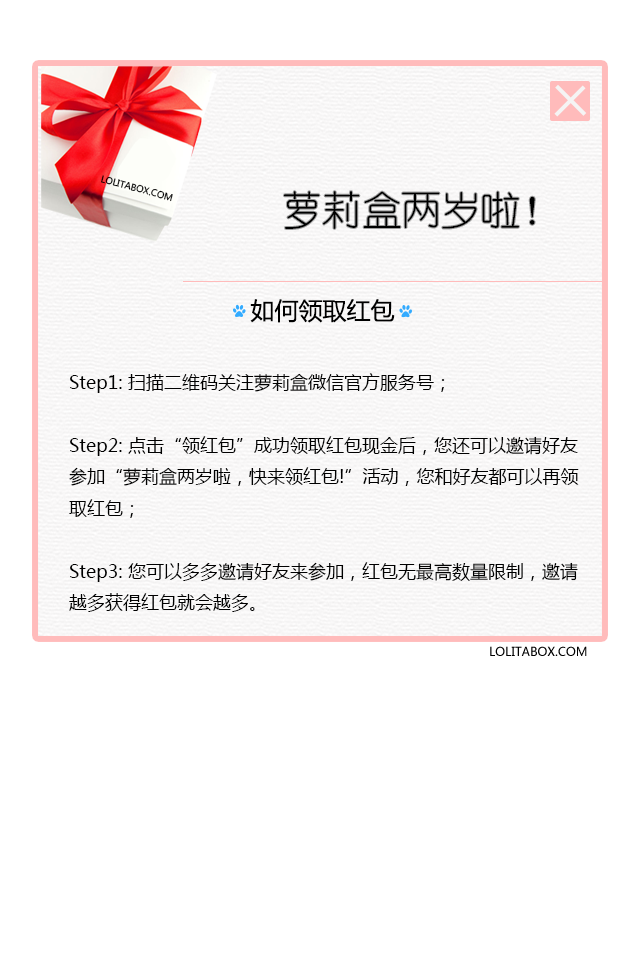
<style>
.page{position:relative;width:640px;height:960px;background:#ffffff}
.page>*{position:absolute;margin:0}
.t1{font:9px "MicrosoftYaHei";color:#000000}
.t2{font:39.8px "YouYuan";color:#000000}
.t3{font:24px "MicrosoftYaHei";color:#000000}
.t4{font:18px "MicrosoftYaHei";color:#000000}
.t5{font:12px "MicrosoftYaHei";color:#000000}
</style>
<div class="page">
<p class="t1" style="left:101px;top:175px;width:72px;height:27px;rotate:15deg">LOLITABOX.COM</p>
<p class="t2" style="left:283px;top:191px;width:252px;height:38px">萝莉盒两岁啦！</p>
<p class="t3" style="left:250px;top:299px;width:145px;height:24px">如何领取红包</p>
<p class="t4" style="left:69px;top:373px;width:510px;height:239px">Step1: 扫描二维码关注萝莉盒微信官方服务号；<br><br>Step2: 点击“领红包”成功领取红包现金后，您还可以邀请好友<br>参加“萝莉盒两岁啦，快来领红包!”活动，您和好友都可以再领<br>取红包；<br><br>Step3: 您可以多多邀请好友来参加，红包无最高数量限制，邀请<br>越多获得红包就会越多。</p>
<p class="t5" style="left:490px;top:646px;width:97px;height:10px">LOLITABOX.COM</p>
</div>
